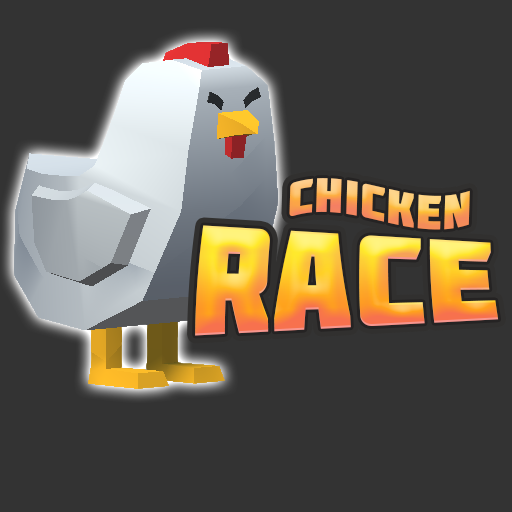
<style>
.page{position:relative;width:512px;height:512px;background:#333333}
.page>*{position:absolute;margin:0}
.t1{font:48px "Molot";letter-spacing:0.025em}
.t2{font:106.7px "Molot";letter-spacing:0.01em;scale:1.25 1}
</style>
<div class="page">
<p class="t1" style="left:289px;top:178px;width:181px;height:52px;rotate:2deg">Сhicken</p>
<p class="t2" style="left:195px;top:225px;width:304px;height:111px">RACE</p>
</div>
